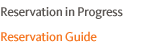
<style>
.page{position:relative;width:150px;height:50px;background:#ffffff}
.page>*{position:absolute;margin:0}
.t1{font:13px "KievitPro-Medium";letter-spacing:-0.025em;color:#5a5653}
.t2{font:13px "KievitPro-Medium";letter-spacing:-0.025em;color:#f57723}
</style>
<div class="page">
<p class="t1" style="left:1px;top:7px;width:122px;height:12px">Reservation in Progress</p>
<p class="t2" style="left:1px;top:31px;width:96px;height:11px">Reservation Guide</p>
</div>
